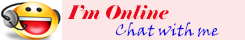
<style>
.page{position:relative;width:245px;height:40px;background:#fce6e6}
.page>*{position:absolute;margin:0}
.t1{font:18.7px "Elephant-Italic";color:#e80a1a}
.t2{font:12px "VinerHandITC";color:#0a0ae8}
</style>
<div class="page">
<p class="t1" style="left:66px;top:5px;width:103px;height:15px">I’m Online</p>
<p class="t2" style="left:115px;top:22px;width:104px;height:15px">Chat with me</p>
</div>
